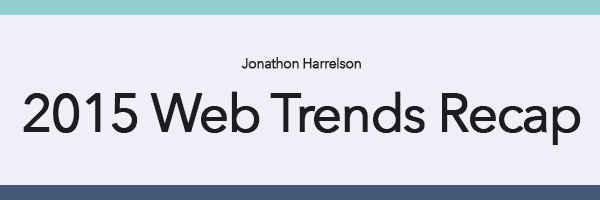
<style>
.page{position:relative;width:600px;height:200px;background:#efeff7}
.page>*{position:absolute;margin:0}
.t1{font:52.9px "AvenirNext-Regular";letter-spacing:-0.05em;color:#1c1d21;font-weight:bold}
.t2{font:14px "AvenirNext-Regular";letter-spacing:-0.05em;color:#1c1d21;font-weight:bold}
</style>
<div class="page">
<p class="t1" style="left:23px;top:57px;width:558px;height:88px;text-align:center"><span class="t2">Jonathon Harrelson<br></span>2015 Web Trends Recap</p>
</div>
